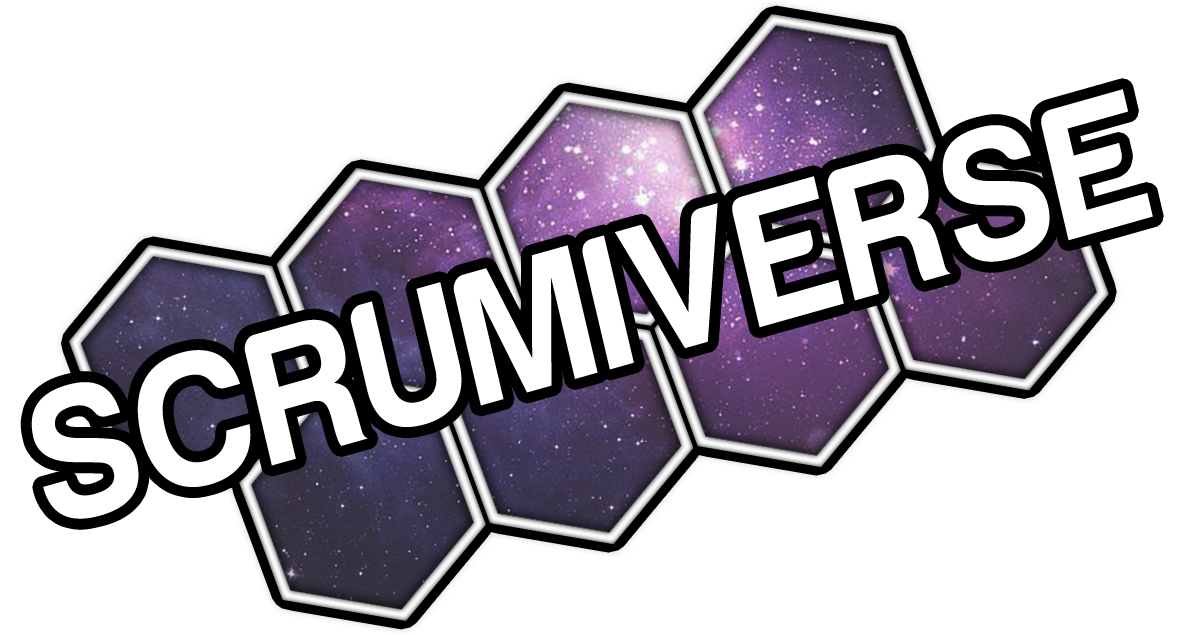
<style>
.page{position:relative;width:1199px;height:635px;background:#ffffff}
.page>*{position:absolute;margin:0}
.t1{font:192px "HarabaraMaisBold-HarabaraMaisBold";color:#ffffff;text-transform:uppercase;scale:0.92 1}
</style>
<div class="page">
<p class="t1" style="left:31px;top:89px;width:1122px;height:430px;rotate:-16deg">SCRUMIVERSE</p>
</div>
